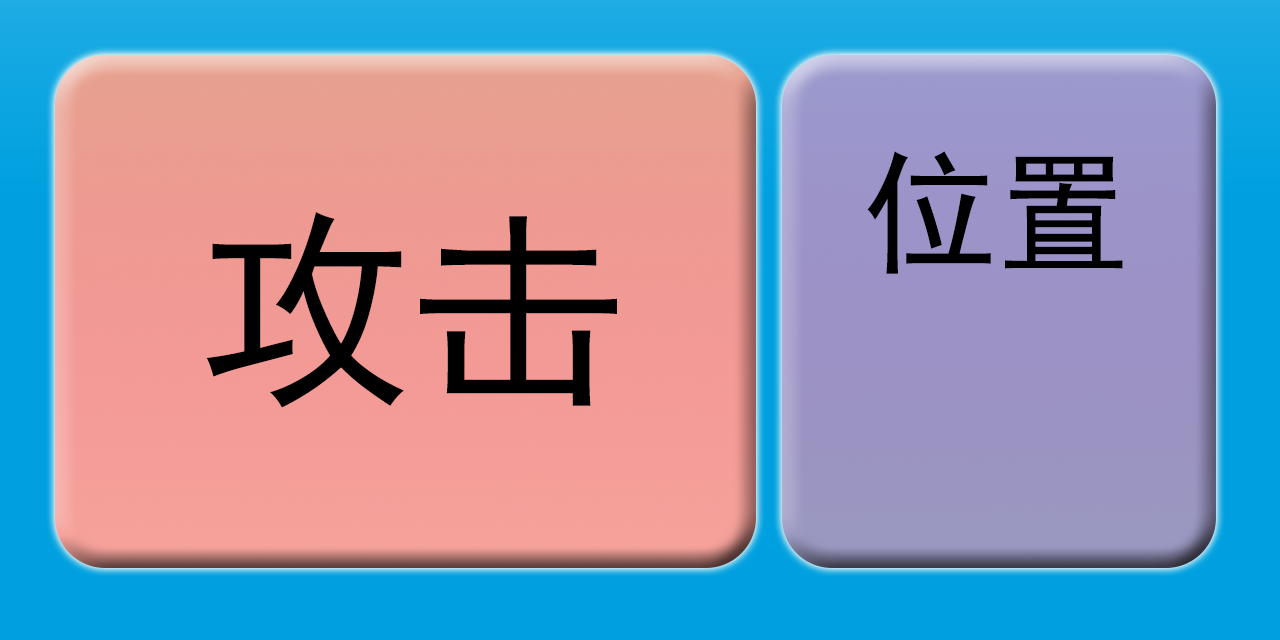
<style>
.page{position:relative;width:1280px;height:640px}
.page>*{position:absolute;margin:0}
.t1{font:133.3px "SimHei";color:#000000}
.t2{font:213.4px "SimHei";color:#000000}
</style>
<div class="page">
<p class="t1" style="left:867px;top:151px;width:256px;height:123px">位置</p>
<p class="t2" style="left:206px;top:212px;width:411px;height:196px">攻击</p>
</div>
